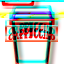
<style>
.page{position:relative;width:64px;height:64px;background:#ffffff}
.page>*{position:absolute;margin:0}
.t1{font:8px "Algerian"}
</style>
<div class="page">
<p class="t1" style="left:8px;top:19px;width:48px;height:14px">Cappuccino</p>
</div>
